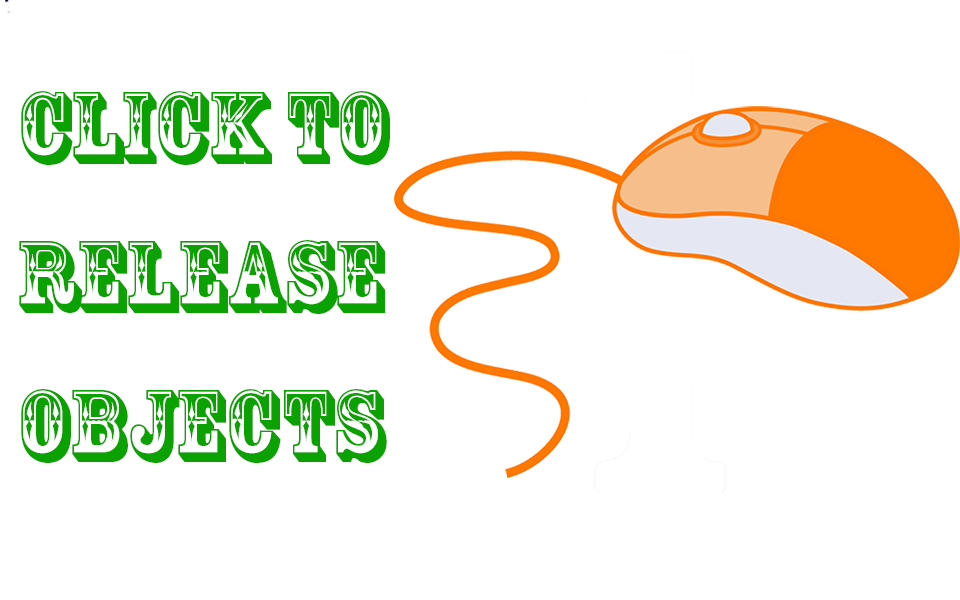
<style>
.page{position:relative;width:960px;height:600px;background:#ffffff}
.page>*{position:absolute;margin:0}
.t1{font:95.3px/149.3px "RosewoodStd-Regular";color:#0ba100}
</style>
<div class="page">
<p class="t1" style="left:19px;top:91px;width:371px;height:372px">Click To <br>Release<br>Objects</p>
</div>
